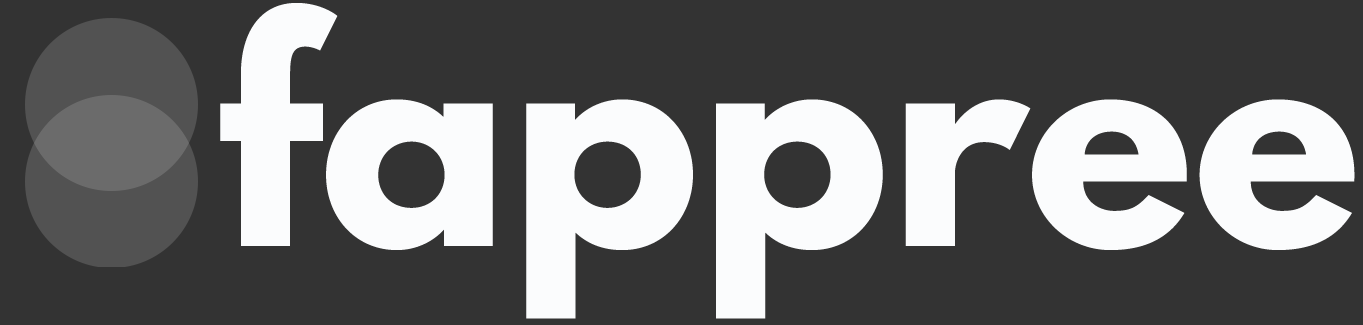
<style>
.page{position:relative;width:1363px;height:325px;background:#333333}
.page>*{position:absolute;margin:0}
.t1{font:277.8px "LeagueSpartan-Bold";color:#fbfcfd}
</style>
<div class="page">
<p class="t1" style="left:220px;top:3px;width:1135px;height:316px">fappree</p>
</div>
